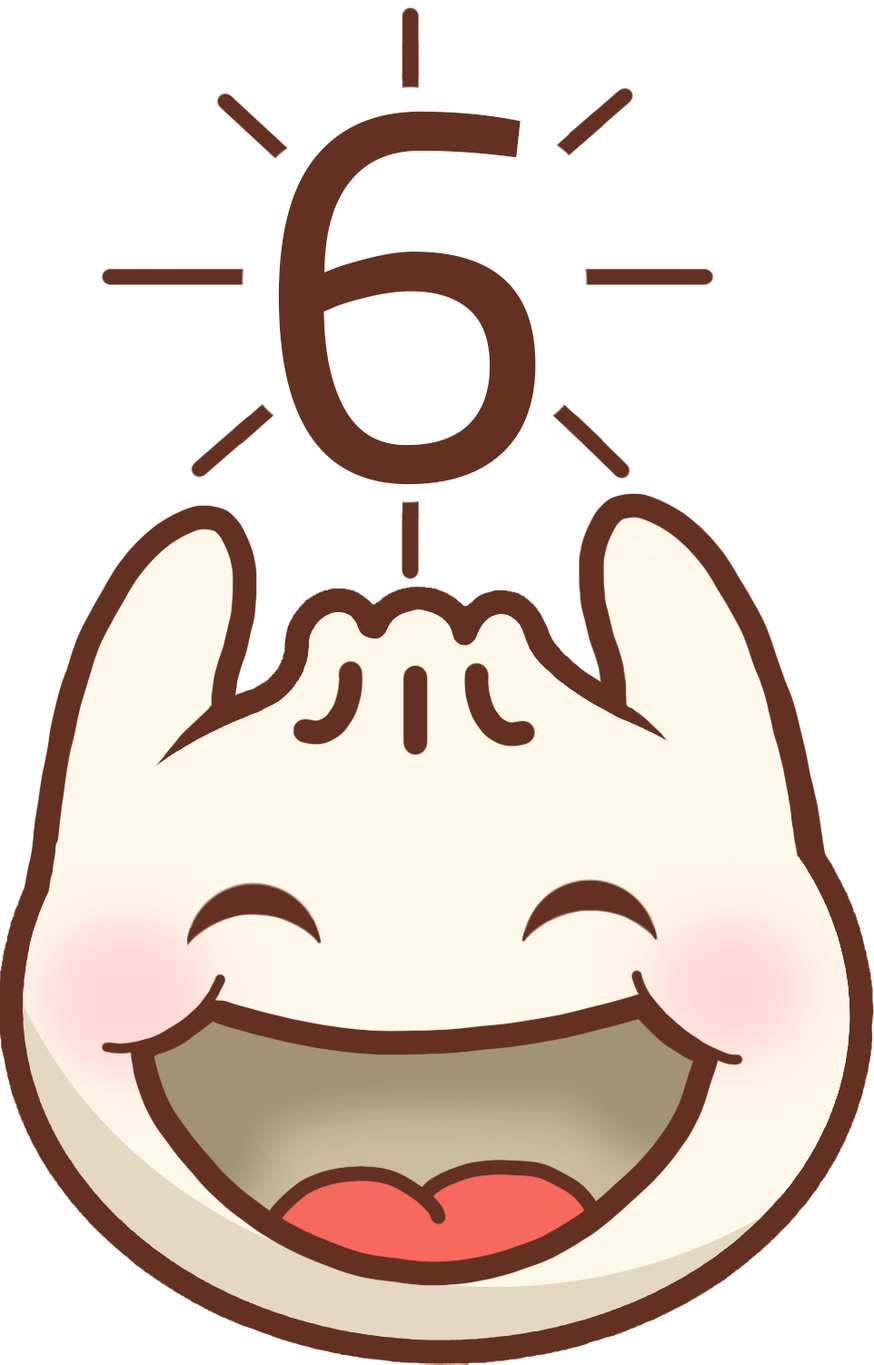
<style>
.page{position:relative;width:874px;height:1365px;background:#ffffff}
.page>*{position:absolute;margin:0}
.t1{font:544.9px "TitilliumWeb-Regular";letter-spacing:0.01em;color:#643022;font-weight:bold}
</style>
<div class="page">
<p class="t1" style="left:278px;top:111px;width:258px;height:374px">6</p>
</div>
